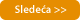
<style>
.page{position:relative;width:80px;height:20px;background:#e68d00}
.page>*{position:absolute;margin:0}
.t1{font:11px "MyriadPro-Semibold";color:#ffffff}
</style>
<div class="page">
<p class="t1" style="left:15px;top:5px;width:52px;height:8px">Sledeća &gt;&gt;</p>
</div>
